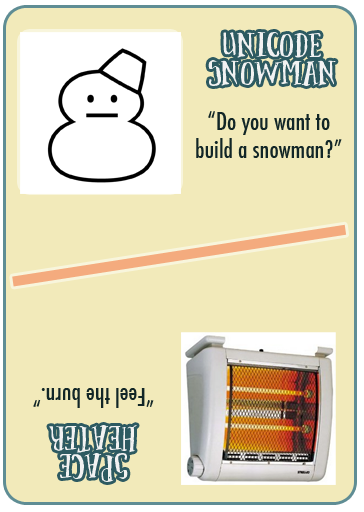
<style>
.page{position:relative;width:364px;height:512px;background:#f2eaba}
.page>*{position:absolute;margin:0}
.t1{font:36px/28px "Brave";color:#f2f2f2}
.t2{font:24px/28px "Futura-CondensedMedium";color:#122627}
.t3{font:24px "Futura-CondensedMedium";color:#122627}
</style>
<div class="page">
<p class="t1" style="left:208px;top:32px;width:128px;height:54px;text-align:center">Unicode<br>Snowman</p>
<p class="t2" style="left:196px;top:111px;width:146px;height:47px;text-align:center">“Do you want to build a snowman?”</p>
<p class="t3" style="left:33px;top:388px;width:121px;height:20px;rotate:180deg">“Feel the burn.”</p>
<p class="t1" style="left:49px;top:425px;width:88px;height:57px;text-align:center;rotate:-180deg">Space<br>Heater</p>
</div>
